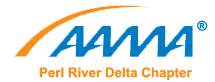
<style>
.page{position:relative;width:215px;height:82px;background:#ffffff}
.page>*{position:absolute;margin:0}
.t1{font:13.3px "Arial-BoldMT";color:#007bc4}
.t2{font:13.3px "Arial-BoldMT";color:#f89018}
</style>
<div class="page">
<p class="t1" style="left:197px;top:20px;width:11px;height:11px">®</p>
<p class="t2" style="left:39px;top:67px;width:153px;height:13px">Perl River Delta Chapter</p>
</div>
